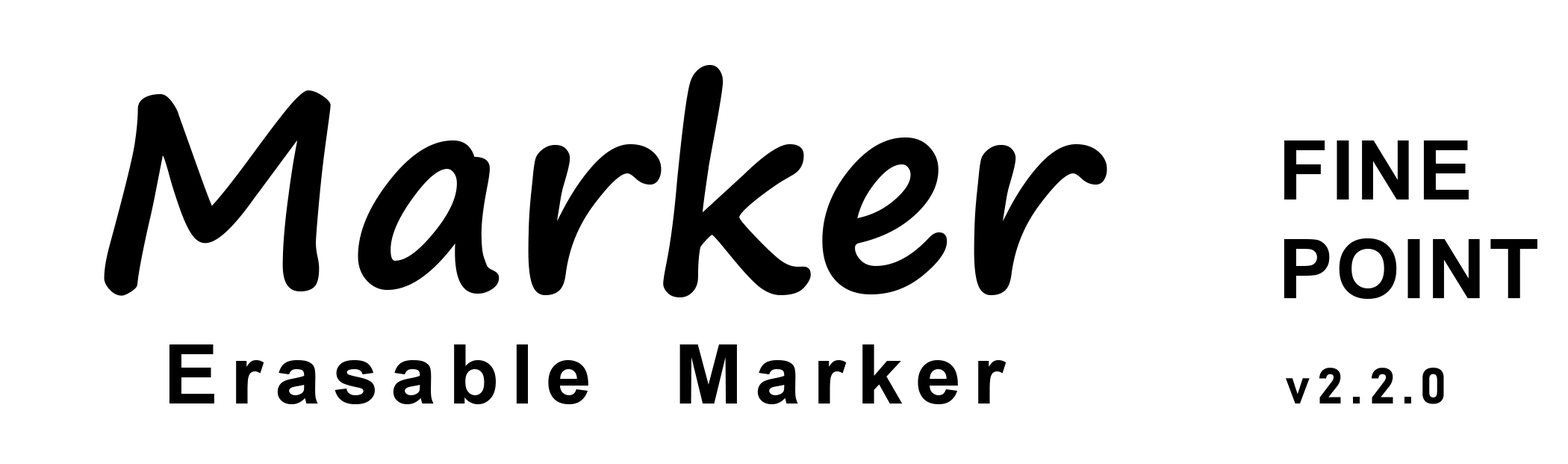
<style>
.page{position:relative;width:1568px;height:464px;background:#ffffff}
.page>*{position:absolute;margin:0}
.t1{font:273.5px "SegoePrint-Bold";color:#000000}
.t2{font:82.1px "Arial-BoldMT";letter-spacing:0.03em;color:#000000}
.t3{font:82.1px "Arial-BoldMT";letter-spacing:0.15em;color:#000000}
.t4{font:49.8px "Bahnschrift-Bold";letter-spacing:0.15em;color:#000000}
</style>
<div class="page">
<p class="t1" style="left:104px;top:65px;width:1003px;height:232px">Marker</p>
<p class="t2" style="left:1284px;top:140px;width:253px;height:159px">FINE<br>POINT</p>
<p class="t3" style="left:169px;top:344px;width:838px;height:60px">Erasable  Marker</p>
<p class="t4" style="left:1286px;top:367px;width:158px;height:37px">v2.2.0</p>
</div>
